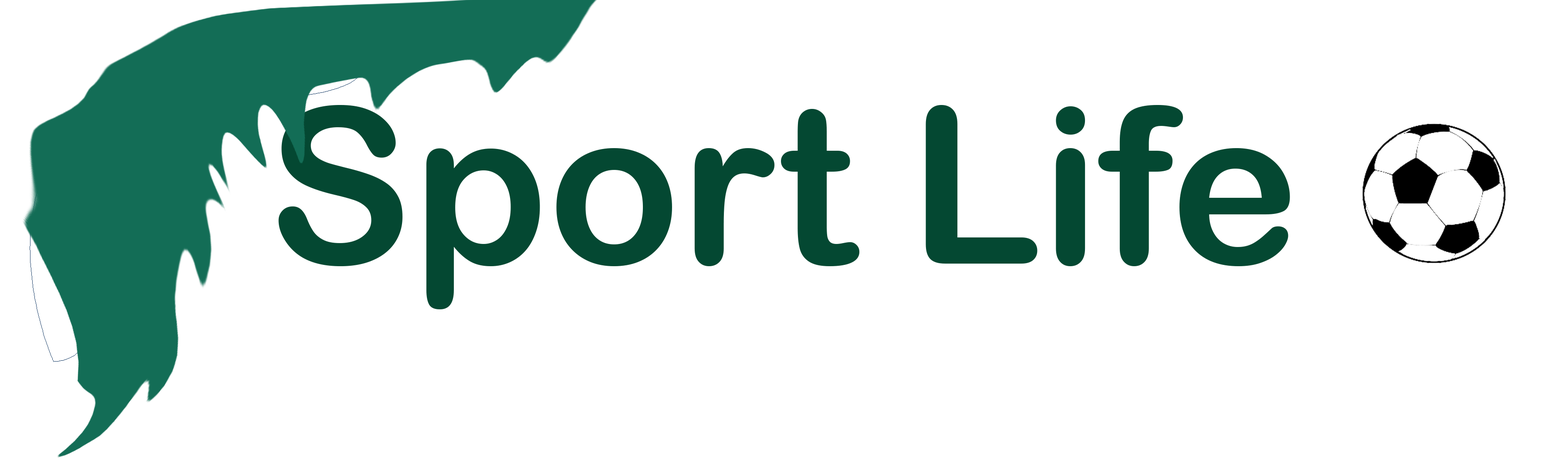
<style>
.page{position:relative;width:1568px;height:474px;background:#ffffff}
.page>*{position:absolute;margin:0}
.t1{font:217.8px "ArialRoundedMTBold";color:#044832}
</style>
<div class="page">
<p class="t1" style="left:278px;top:105px;width:1012px;height:204px">Sport Life</p>
</div>
